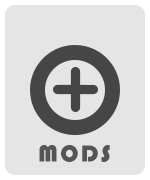
<style>
.page{position:relative;width:150px;height:180px;background:#e5e5e5}
.page>*{position:absolute;margin:0}
.t1{font:24px "Bauhaus93";letter-spacing:0.1em;color:#555555}
</style>
<div class="page">
<p class="t1" style="left:39px;top:145px;width:71px;height:17px">MODS</p>
</div>
